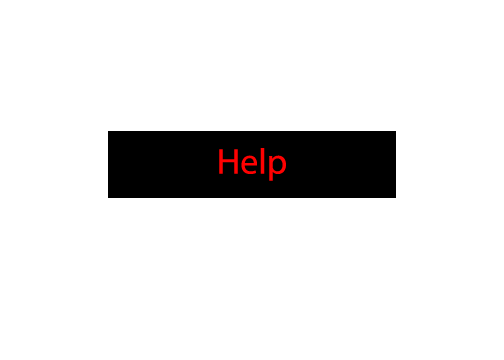
<style>
.page{position:relative;width:504px;height:360px;background:#ffffff}
.page>*{position:absolute;margin:0}
.t1{font:36px "MyriadPro-Regular";color:#ff0101}
</style>
<div class="page">
<p class="t1" style="left:219px;top:148px;width:67px;height:33px">Help</p>
</div>
